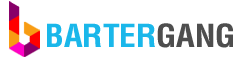
<style>
.page{position:relative;width:240px;height:58px;background:#ffffff}
.page>*{position:absolute;margin:0}
.t1{font:49.2px "PSLxDisplay-Bold";color:#1ab7ea}
.t2{font:49.2px "PSLxDisplay-Bold";color:#4e4e4e}
</style>
<div class="page">
<p class="t1" style="left:47px;top:23px;width:186px;height:25px">BARTER<span class="t2">GANG</span></p>
</div>
